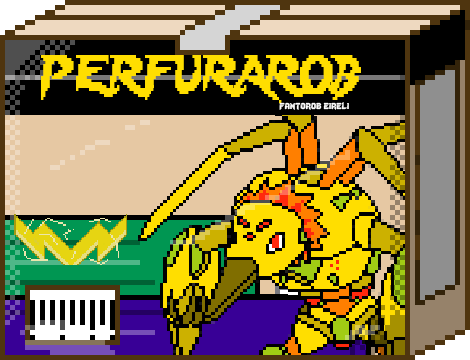
<style>
.page{position:relative;width:470px;height:360px}
.page>*{position:absolute;margin:0}
.t1{font:48px "Lady-Radical";color:#ffde00;scale:0.72 1}
.t2{font:12px "Lady-Radical";color:#fbfbfb}
</style>
<div class="page">
<p class="t1" style="left:41px;top:55px;width:320px;height:48px">PERFURAROB</p>
<p class="t2" style="left:279px;top:102px;width:70px;height:8px">fantorob eireli</p>
</div>
